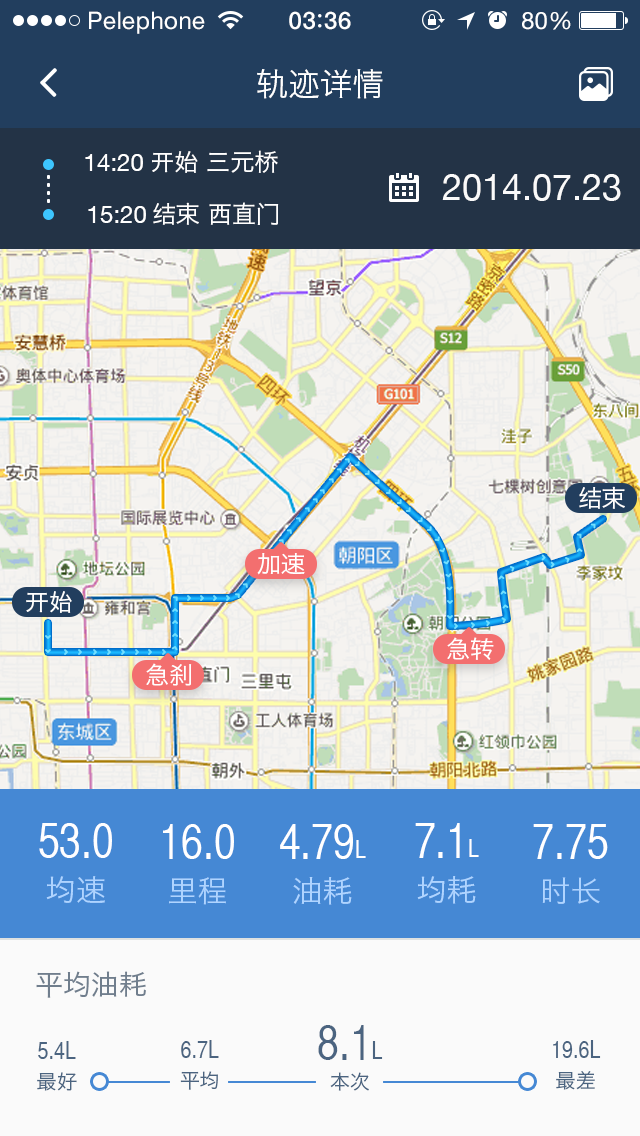
<style>
.page{position:relative;width:640px;height:1136px}
.page>*{position:absolute;margin:0}
.t1{font:24px "HelveticaNeue";letter-spacing:0.02em;color:#ffffff}
.t2{font:24px "HelveticaNeue-Medium";letter-spacing:0.03em;color:#ffffff}
.t3{font:32px "HiraginoSansGB-W3";color:#ffffff}
.t4{font:24px "HiraginoSansGB-W3";color:#ffffff}
.t5{font:24px "HelveticaNeue";color:#ffffff}
.t6{font:36px "HelveticaNeue";color:#fafafa}
.t7{font:24px "HiraginoSansGB-W3";color:#fefeff}
.t8{font:48px/44px "HelveticaCYPlain";color:#fefeff}
.t9{font:30px/44px "HiraginoSansGB-W3";color:#afd4ff}
.t10{font:48px/44px "HelveticaCYPlain";color:#ffffff}
.t11{font:24px/44px "HelveticaCYPlain";color:#ffffff}
.t12{font:28px "HiraginoSansGB-W3";color:#707e8d}
.t13{font:48px/30px "HelveticaCYPlain";color:#4b6480}
.t14{font:24px/30px "HelveticaCYPlain";color:#4b6480}
.t15{font:20px/30px "HiraginoSansGB-W3";color:#4b6480}
</style>
<div class="page">
<p class="t1" style="left:89px;top:11px;width:116px;height:23px">Pelephone</p>
<p class="t2" style="left:289px;top:11px;width:62px;height:19px">03 36</p>
<p class="t1" style="left:522px;top:11px;width:49px;height:19px">80%</p>
<p class="t3" style="left:257px;top:69px;width:126px;height:30px">轨迹详情</p>
<p class="t4" style="left:85px;top:150px;width:193px;height:23px"><span class="t5">14:20 </span>开始 三元桥</p>
<p class="t6" style="left:442px;top:174px;width:179px;height:27px">2014.07.23</p>
<p class="t4" style="left:88px;top:202px;width:191px;height:23px"><span class="t5">15:20 </span>结束 西直门</p>
<p class="t4" style="left:579px;top:486px;width:46px;height:23px">结束</p>
<p class="t4" style="left:257px;top:553px;width:48px;height:22px">加速</p>
<p class="t7" style="left:26px;top:591px;width:46px;height:22px">开始</p>
<p class="t4" style="left:447px;top:637px;width:47px;height:23px">急转</p>
<p class="t4" style="left:146px;top:663px;width:46px;height:23px">急刹</p>
<p class="t8" style="left:39px;top:823px;width:73px;height:80px;text-align:center">53.0<br><span class="t9">均速</span></p>
<p class="t10" style="left:163px;top:824px;width:71px;height:81px;text-align:center">16.0<br><span class="t9">里程</span></p>
<p class="t10" style="left:280px;top:824px;width:86px;height:81px;text-align:center">4.79<span class="t11">L<br></span><span class="t9">油耗</span></p>
<p class="t10" style="left:415px;top:823px;width:64px;height:81px;text-align:center">7.1<span class="t11">L<br></span><span class="t9">均耗</span></p>
<p class="t10" style="left:533px;top:824px;width:75px;height:80px;text-align:center">7.75<br><span class="t9">时长</span></p>
<p class="t12" style="left:36px;top:971px;width:110px;height:27px">平均油耗</p>
<p class="t13" style="left:318px;top:1025px;width:65px;height:66px;text-align:center">8.1<span class="t14">L<br></span><span class="t15">本次</span></p>
<p class="t14" style="left:37px;top:1041px;width:40px;height:50px;text-align:center">5.4L<br><span class="t15">最好</span></p>
<p class="t14" style="left:180px;top:1040px;width:39px;height:50px;text-align:center">6.7L<br><span class="t15">平均</span></p>
<p class="t14" style="left:553px;top:1040px;width:48px;height:50px;text-align:center">19.6L<br><span class="t15">最差</span></p>
</div>
